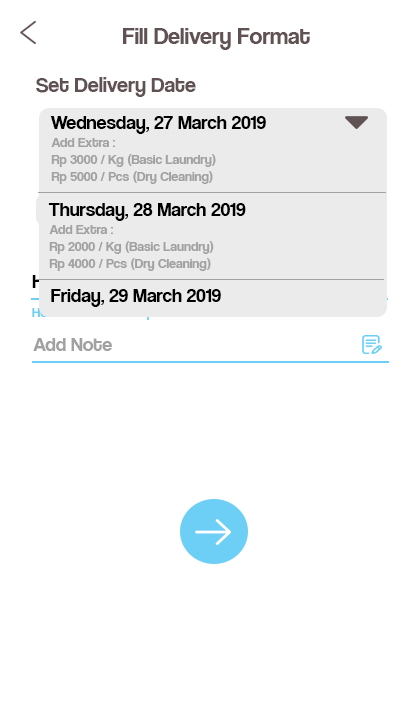
<style>
.page{position:relative;width:420px;height:720px;background:#ffffff}
.page>*{position:absolute;margin:0}
.t1{font:24px "CoolveticaRg-Regular";color:#605252}
.t2{font:22px "CoolveticaRg-Regular";color:#605252}
.t3{font:20px "CoolveticaRg-Regular";color:#000000}
.t4{font:14px "CoolveticaRg-Regular";color:#a1a1a1}
.t5{font:14px "CoolveticaRg-Regular";color:#ebebeb}
.t6{font:20px "CoolveticaRg-Regular";color:#a1a1a1}
</style>
<div class="page">
<p class="t1" style="left:123px;top:28px;width:187px;height:22px">Fill Delivery Format</p>
<p class="t2" style="left:36px;top:77px;width:160px;height:20px">Set Delivery Date</p>
<p class="t3" style="left:50px;top:116px;width:216px;height:18px">Wednesday, 27 March 2019</p>
<p class="t4" style="left:51px;top:138px;width:165px;height:46px">Add Extra : <br>Rp 3000 / Kg (Basic Laundry) <br>Rp 5000 / Pcs (Dry Cleaning)</p>
<p class="t3" style="left:48px;top:203px;width:198px;height:18px">Thursday, 28 March 2019</p>
<p class="t4" style="left:49px;top:225px;width:165px;height:46px">Add Extra : <br>Rp 2000 / Kg (Basic Laundry) <br>Rp 4000 / Pcs (Dry Cleaning)</p>
<p class="t3" style="left:51px;top:289px;width:170px;height:18px">Friday, 29 March 2019</p>
<p class="t5" style="left:32px;top:308px;width:187px;height:12px">Home / Office / Campus / Others</p>
<p class="t6" style="left:33px;top:338px;width:79px;height:13px">Add Note</p>
</div>
